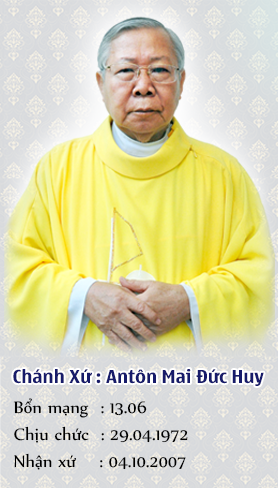
<style>
.page{position:relative;width:278px;height:488px}
.page>*{position:absolute;margin:0}
.t1{font:18px "UTMNokiaStandardBold";color:#171b6a}
.t2{font:20px/27px "UTM-Nyala";color:#000000}
</style>
<div class="page">
<p class="t1" style="left:13px;top:369px;width:251px;height:17px">Chánh Xứ : Antôn Mai Đức Huy</p>
<p class="t2" style="left:13px;top:398px;width:175px;height:72px">Bổn mạng  : 13.06<br>Chịu chức  : 29.04.1972<br>Nhận xứ    : 04.10.2007</p>
</div>
